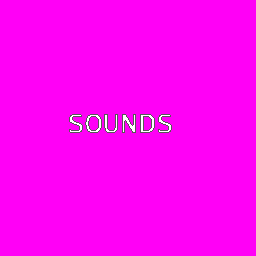
<style>
.page{position:relative;width:256px;height:256px;background:#ff00f6}
.page>*{position:absolute;margin:0}
.t1{font:30px "LucidaConsole";letter-spacing:0.02em;color:#ffffff;scale:0.95 1}
</style>
<div class="page">
<p class="t1" style="left:69px;top:114px;width:103px;height:19px">SOUNDS</p>
</div>
